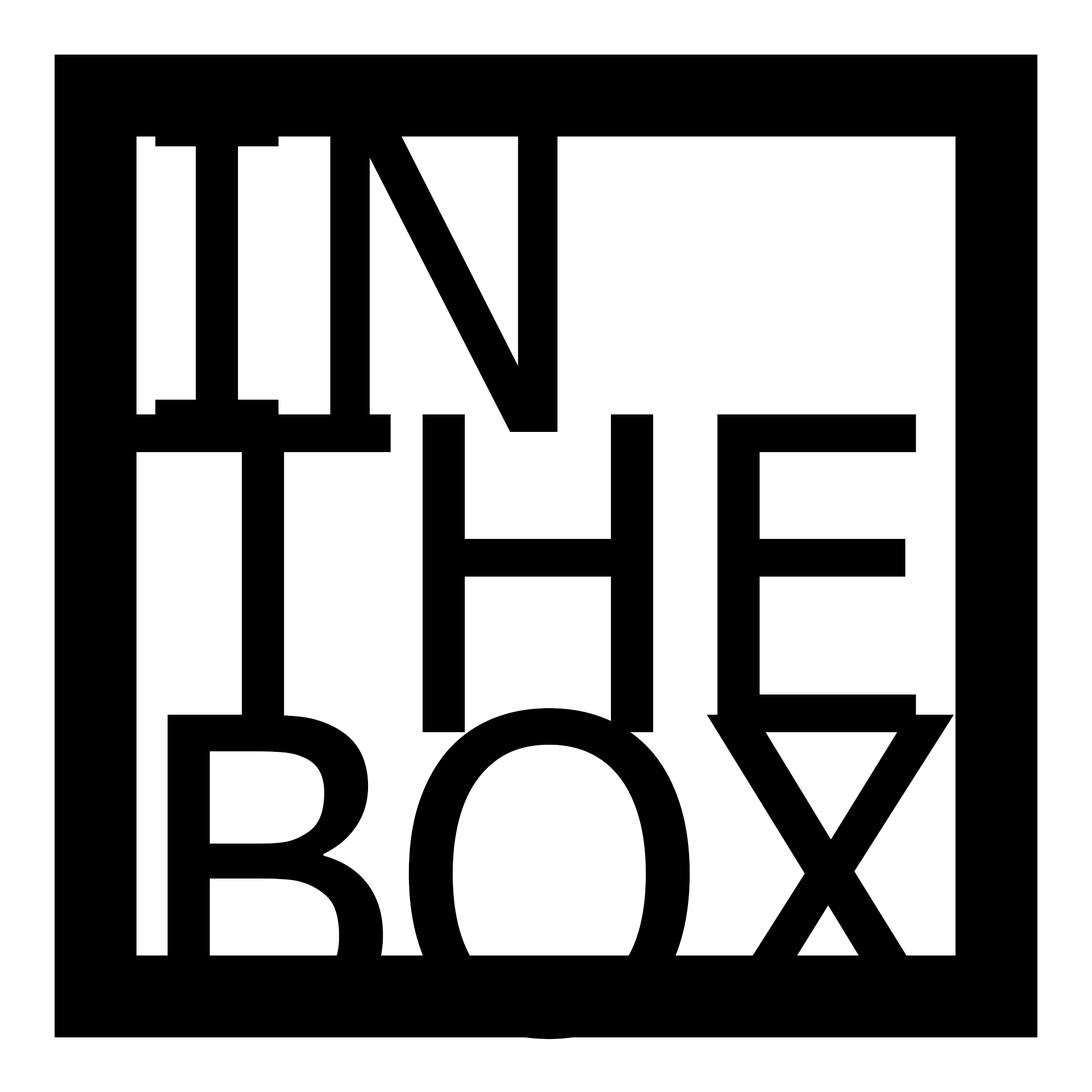
<style>
.page{position:relative;width:1092px;height:1092px;background:#ffffff}
.page>*{position:absolute;margin:0}
.t1{font:436.8px/300.3px "Tahoma";color:#000000}
</style>
<div class="page">
<p class="t1" style="left:135px;top:114px;width:819px;height:925px">IN<br>THE<br>BOX</p>
</div>
